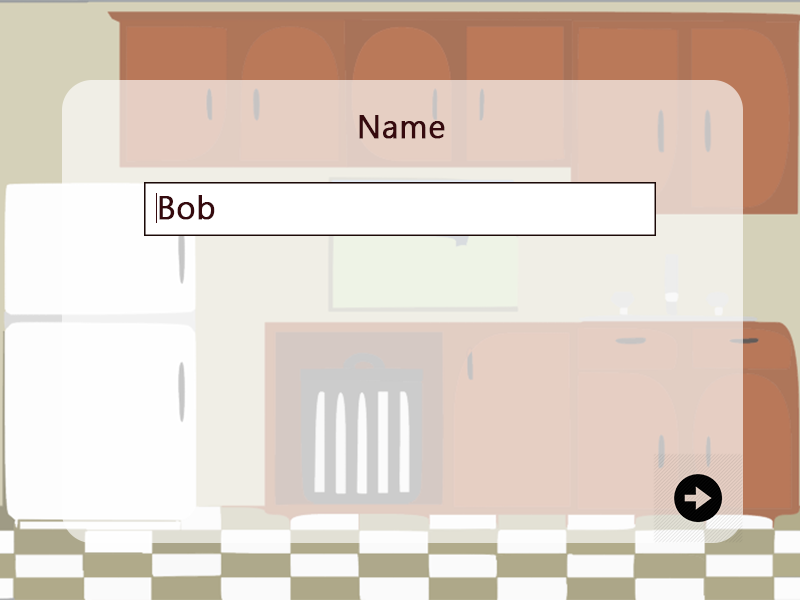
<style>
.page{position:relative;width:800px;height:600px}
.page>*{position:absolute;margin:0}
.t1{font:30px "MicrosoftJhengHeiRegular";letter-spacing:0.009em;color:#360a0e;font-weight:bold}
</style>
<div class="page">
<p class="t1" style="left:359px;top:115px;width:86px;height:24px">Name</p>
<p class="t1" style="left:159px;top:195px;width:56px;height:25px">Bob</p>
</div>
